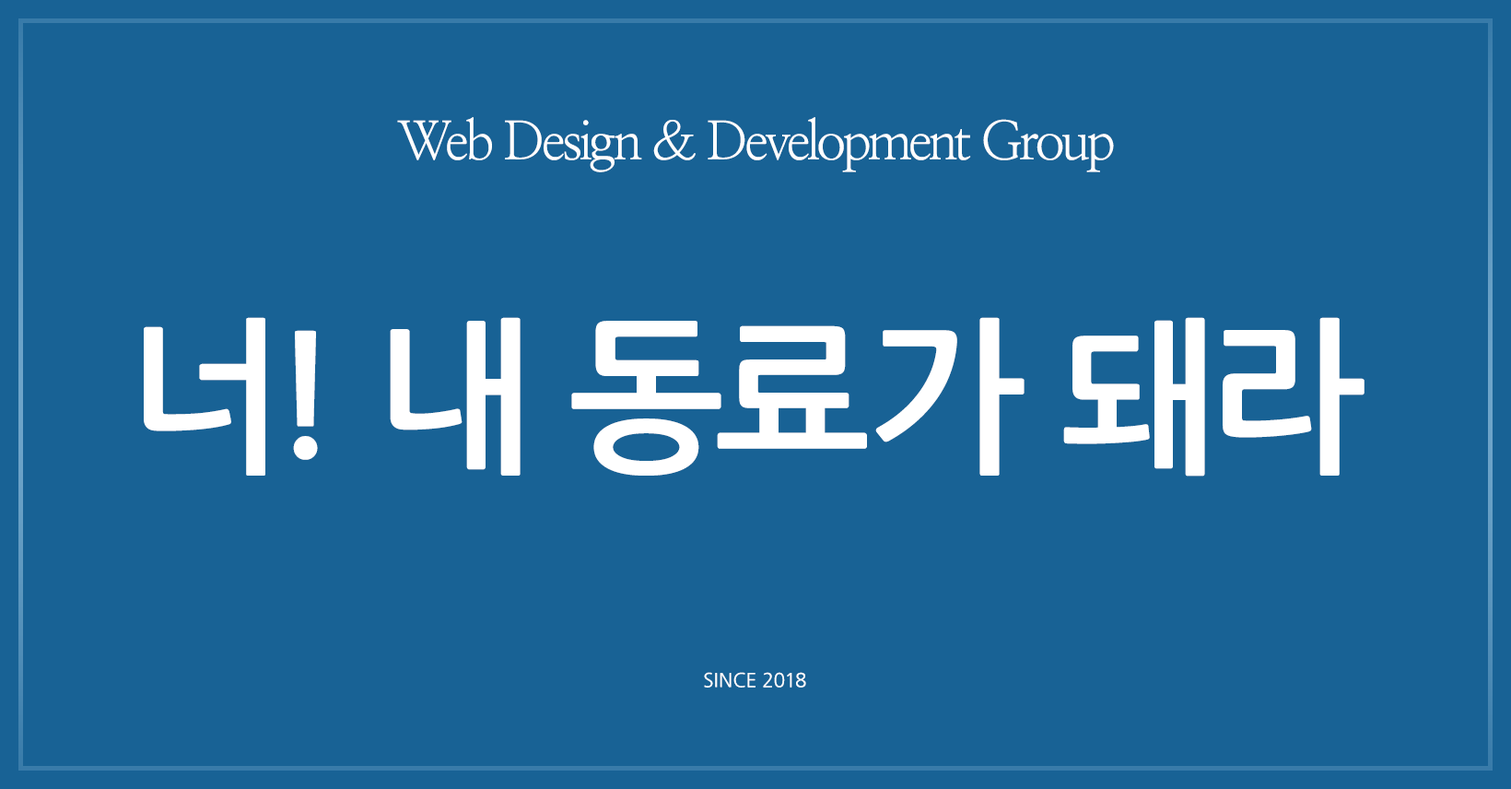
<style>
.page{position:relative;width:1511px;height:789px;background:#186295}
.page>*{position:absolute;margin:0}
.t1{font:53px "NanumMyeongjo";letter-spacing:-0.065em;color:#ffffff}
.t2{font:165.9px "NanumGothicBold";letter-spacing:-0.03em;color:#ffffff}
.t3{font:19.2px "NanumGothic";color:#ffffff;text-transform:uppercase}
</style>
<div class="page">
<p class="t1" style="left:397px;top:117px;width:717px;height:55px">Web Design &amp; Development Group</p>
<p class="t2" style="left:144px;top:317px;width:1221px;height:159px">너! 내 동료가 돼라</p>
<p class="t3" style="left:704px;top:672px;width:102px;height:16px">Since 2018</p>
</div>
